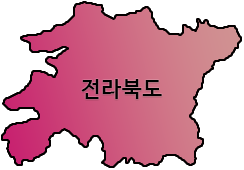
<style>
.page{position:relative;width:244px;height:170px;background:#ffffff}
.page>*{position:absolute;margin:0}
.t1{font:22px "HancomGothicBold";color:#000000}
</style>
<div class="page">
<p class="t1" style="left:81px;top:79px;width:81px;height:20px">전라북도</p>
</div>
